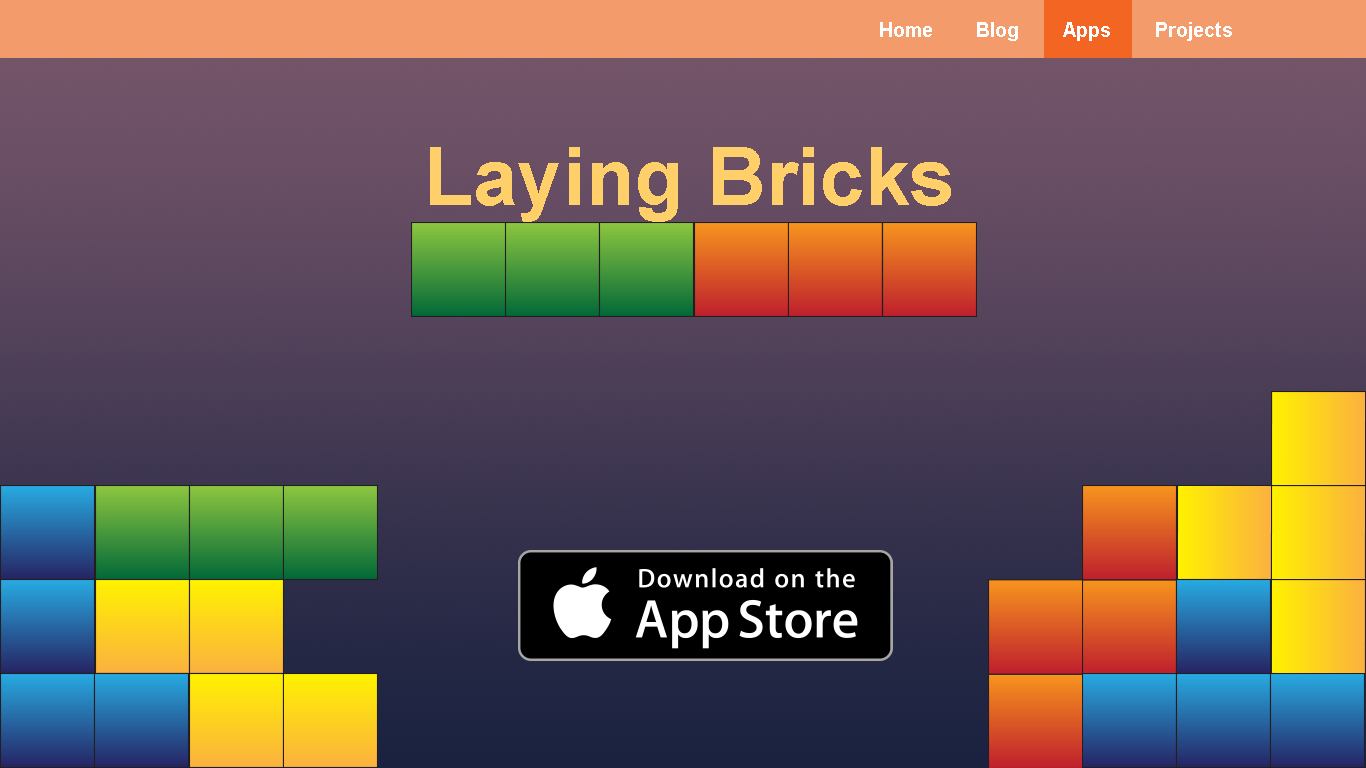
<style>
.page{position:relative;width:1366px;height:768px}
.page>*{position:absolute;margin:0}
.t1{font:20px "Arial-BoldMT";color:#ffffff}
.t2{font:81px "Arial-BoldMT";color:#ffcf6a}
</style>
<div class="page">
<p class="t1" style="left:880px;top:22px;width:52px;height:15px">Home</p>
<p class="t1" style="left:977px;top:22px;width:41px;height:19px">Blog</p>
<p class="t1" style="left:1063px;top:22px;width:47px;height:19px">Apps</p>
<p class="t1" style="left:1156px;top:22px;width:76px;height:19px">Projects</p>
<p class="t2" style="left:430px;top:147px;width:521px;height:75px">Laying Bricks</p>
</div>
